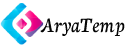
<style>
.page{position:relative;width:128px;height:49px;background:#ffffff}
.page>*{position:absolute;margin:0}
.t1{font:21.9px "NeutonCursive-Regular";color:#050505}
</style>
<div class="page">
<p class="t1" style="left:40px;top:18px;width:85px;height:19px">AryaTemp</p>
</div>
